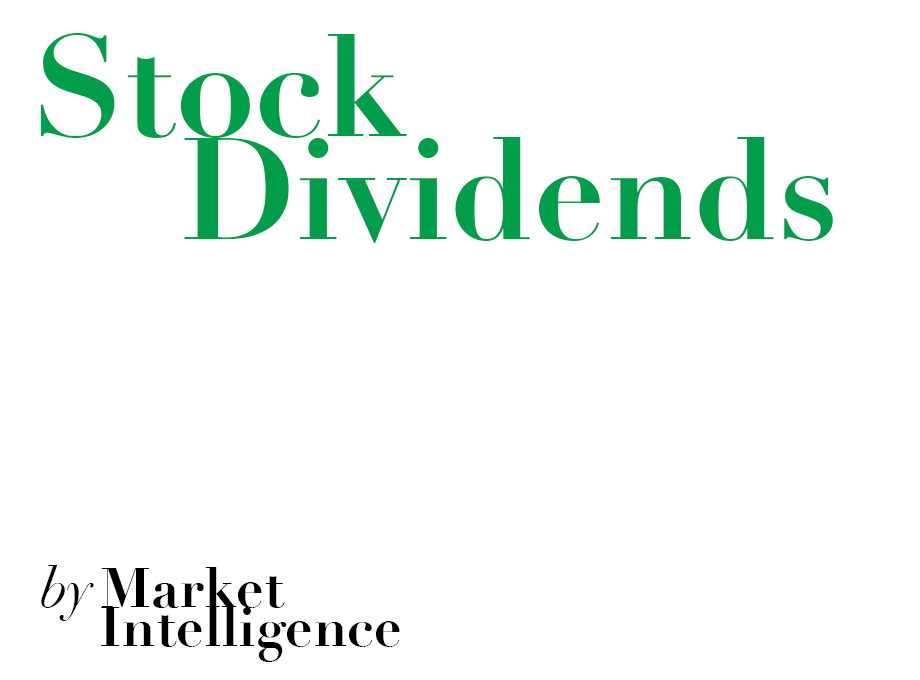
<style>
.page{position:relative;width:920px;height:680px;background:#ffffff}
.page>*{position:absolute;margin:0}
.t1{font:141.7px "Didot-Bold";color:#009d4a}
.t2{font:55px "Didot-Italic";color:#000000}
.t3{font:55px "Didot-Bold";color:#000000}
</style>
<div class="page">
<p class="t1" style="left:40px;top:33px;width:367px;height:105px">Stock</p>
<p class="t1" style="left:184px;top:137px;width:649px;height:106px">Dividends</p>
<p class="t2" style="left:41px;top:565px;width:53px;height:56px">by</p>
<p class="t3" style="left:101px;top:567px;width:184px;height:41px">Market</p>
<p class="t3" style="left:101px;top:606px;width:299px;height:56px">Intelligence</p>
</div>
